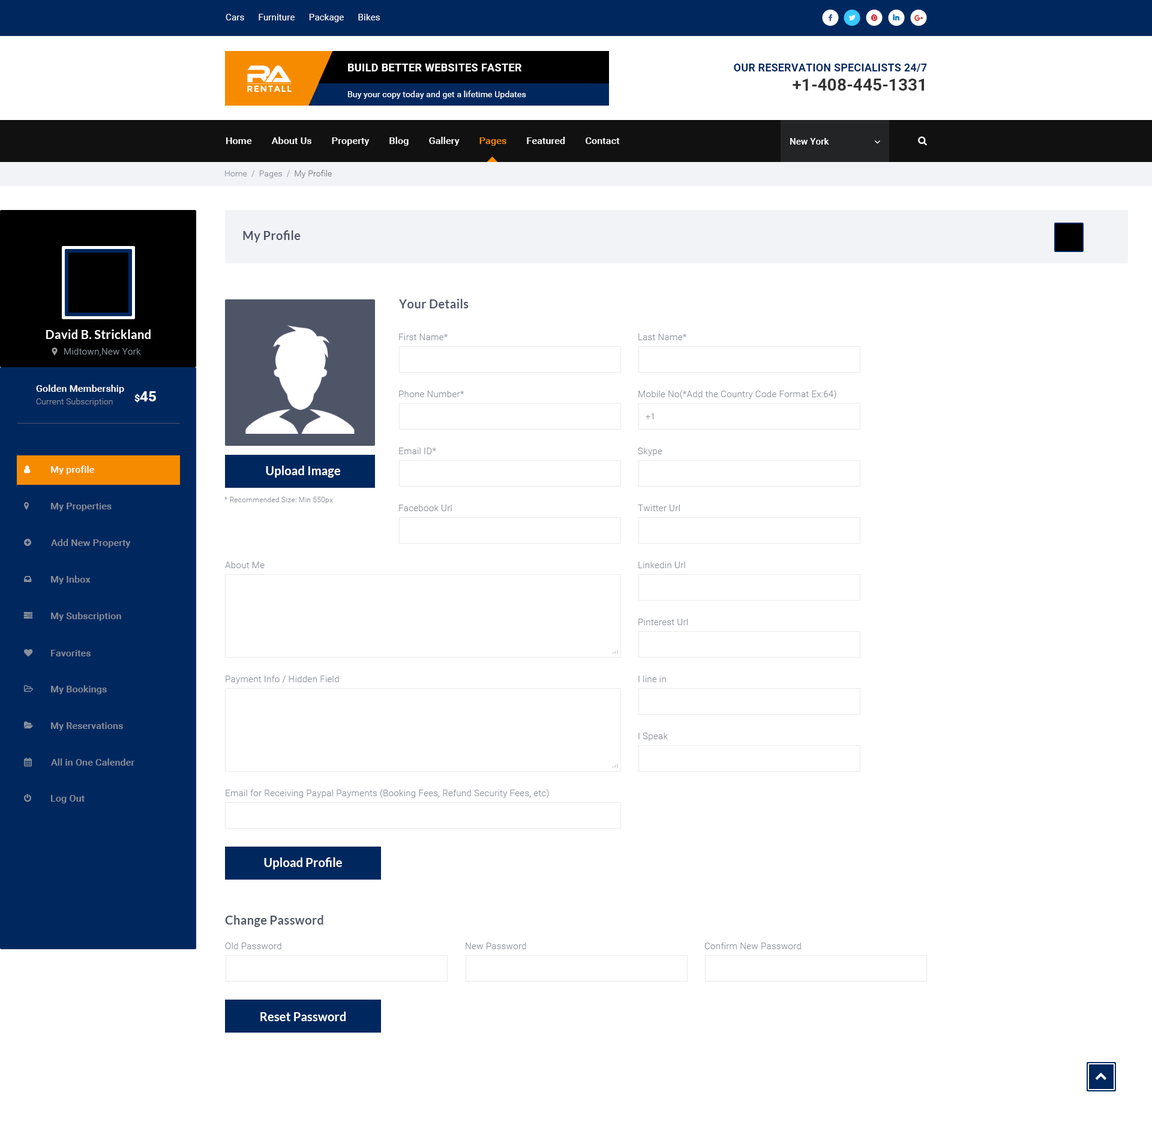
<style>
.page{position:relative;width:1152px;height:1128px;background:#ffffff}
.page>*{position:absolute;margin:0}
.t1{font:9px "Roboto-Regular";letter-spacing:0.01em;color:#ffffff}
.t2{font:10.8px "Roboto-Bold";letter-spacing:0.02em;color:#ffffff;text-transform:uppercase}
.t3{font:10.8px "Roboto-Bold";letter-spacing:0.01em;color:#00285f;text-transform:uppercase}
.t4{font:8.8px "Montserrat-Bold";letter-spacing:0.08em;color:#ffffff;text-transform:uppercase}
.t5{font:16.8px "Roboto-Bold";color:#333333}
.t6{font:8.4px "Roboto-Regular";letter-spacing:0.01em;color:#ffffff}
.t7{font:9.6px "Roboto-Medium";letter-spacing:0.01em;color:#ffffff}
.t8{font:9.6px "Roboto-Medium";letter-spacing:0.01em;color:#f78b00}
.t9{font:9px "Roboto-Medium";letter-spacing:0.01em;color:#ffffff}
.t10{font:8.4px "Roboto-Light";letter-spacing:0.01em;color:#8a8f9a}
.t11{font:8.4px "Roboto-Light";letter-spacing:0.01em;color:#757983}
.t12{font:12px "Lato-Bold";letter-spacing:0.01em;color:#4d5567}
.t13{font:12px "Lato-Bold";letter-spacing:0.01em;color:#ffffff}
.t14{font:9px "Roboto-Light";letter-spacing:0.01em;color:#8a8f9a}
.t15{font:14.4px "Roboto-Bold";letter-spacing:0.01em;color:#ffffff}
.t16{font:9.6px "Roboto-Bold";letter-spacing:0.01em;color:#ffffff}
.t17{font:7.2px "Roboto-Light";letter-spacing:0.01em;color:#8a8f9a}
.t18{font:9.6px "Roboto-Medium";letter-spacing:0.01em;color:#8a8f9a}
.t19{font:9px/1.2px "Roboto-Light";letter-spacing:0.01em;color:#8a8f9a}
</style>
<div class="page">
<p class="t1" style="left:226px;top:14px;width:154px;height:8px">Cars      Furniture      Package      Bikes</p>
<p class="t2" style="left:348px;top:64px;width:174px;height:7px">Build better Websites Faster</p>
<p class="t3" style="left:734px;top:64px;width:193px;height:8px">Our Reservation Specialists 24/7</p>
<p class="t4" style="left:247px;top:85px;width:45px;height:7px">RentAll</p>
<p class="t5" style="left:793px;top:79px;width:131px;height:12px">+1-408-445-1331</p>
<p class="t6" style="left:348px;top:91px;width:178px;height:8px">Buy your copy today and get a lifetime Updates</p>
<p class="t7" style="left:226px;top:137px;width:394px;height:9px">Home        About Us        Property        Blog        Gallery        <span class="t8">Pages</span>        Featured        Contact</p>
<p class="t9" style="left:790px;top:138px;width:39px;height:7px">New York</p>
<p class="t10" style="left:225px;top:170px;width:107px;height:8px">Home  /  Pages  /  <span class="t11">My Profile</span></p>
<p class="t12" style="left:243px;top:230px;width:58px;height:12px">My Profile</p>
<p class="t12" style="left:399px;top:299px;width:70px;height:9px">Your Details</p>
<p class="t13" style="left:46px;top:329px;width:105px;height:10px">David B. Strickland</p>
<p class="t14" style="left:399px;top:334px;width:49px;height:6px">First Name*</p>
<p class="t14" style="left:638px;top:334px;width:48px;height:6px">Last Name*</p>
<p class="t14" style="left:64px;top:348px;width:77px;height:8px">Midtown,New York</p>
<p class="t7" style="left:36px;top:385px;width:88px;height:9px">Golden Membership</p>
<p class="t10" style="left:36px;top:398px;width:77px;height:8px">Current Subscription</p>
<p class="t15" style="left:134px;top:391px;width:22px;height:12px"><span class="t16">$</span>45</p>
<p class="t14" style="left:399px;top:391px;width:65px;height:6px">Phone Number*</p>
<p class="t14" style="left:638px;top:390px;width:198px;height:9px">Mobile No(*Add the Country Code Format Ex:64)</p>
<p class="t10" style="left:646px;top:413px;width:8px;height:6px">+1</p>
<p class="t14" style="left:399px;top:448px;width:37px;height:6px">Email ID*</p>
<p class="t14" style="left:638px;top:448px;width:24px;height:8px">Skype</p>
<p class="t7" style="left:51px;top:466px;width:43px;height:9px">My profile</p>
<p class="t13" style="left:266px;top:466px;width:74px;height:12px">Upload Image</p>
<p class="t17" style="left:224px;top:497px;width:109px;height:6px">* Recommended Size: Min 550px</p>
<p class="t18" style="left:51px;top:503px;width:61px;height:8px">My Properties</p>
<p class="t14" style="left:399px;top:505px;width:53px;height:6px">Facebook Url</p>
<p class="t14" style="left:638px;top:505px;width:42px;height:6px">Twitter Url</p>
<p class="t18" style="left:51px;top:539px;width:80px;height:9px">Add New Property</p>
<p class="t14" style="left:225px;top:562px;width:40px;height:6px">About Me</p>
<p class="t14" style="left:638px;top:562px;width:47px;height:6px">Linkedin Url</p>
<p class="t18" style="left:51px;top:575px;width:40px;height:9px">My Inbox</p>
<p class="t18" style="left:51px;top:612px;width:70px;height:9px">My Subscription</p>
<p class="t14" style="left:638px;top:619px;width:50px;height:6px">Pinterest Url</p>
<p class="t18" style="left:51px;top:650px;width:40px;height:6px">Favorites</p>
<p class="t19" style="left:612px;top:650px;width:6px;height:3px;text-align:right">.<br>..<br>...</p>
<p class="t14" style="left:226px;top:676px;width:113px;height:8px">Payment Info / Hidden Field</p>
<p class="t14" style="left:638px;top:676px;width:28px;height:6px">I line in</p>
<p class="t18" style="left:51px;top:685px;width:56px;height:9px">My Bookings</p>
<p class="t18" style="left:51px;top:722px;width:72px;height:9px">My Reservations</p>
<p class="t14" style="left:638px;top:733px;width:30px;height:8px">I Speak</p>
<p class="t18" style="left:51px;top:758px;width:83px;height:8px">All in One Calender</p>
<p class="t19" style="left:612px;top:764px;width:6px;height:3px;text-align:right">.<br>..<br>...</p>
<p class="t18" style="left:51px;top:795px;width:34px;height:8px">Log Out</p>
<p class="t14" style="left:226px;top:789px;width:323px;height:9px">Email for Receiving Paypal Payments (Booking Fees, Refund Security Fees, etc)</p>
<p class="t13" style="left:264px;top:857px;width:78px;height:12px">Upload Profile</p>
<p class="t12" style="left:225px;top:915px;width:98px;height:12px">Change Password</p>
<p class="t14" style="left:225px;top:943px;width:56px;height:6px">Old Password</p>
<p class="t14" style="left:466px;top:943px;width:60px;height:6px">New Password</p>
<p class="t14" style="left:704px;top:943px;width:97px;height:6px">Confirm New Password</p>
<p class="t13" style="left:260px;top:1012px;width:86px;height:9px">Reset Password</p>
</div>
